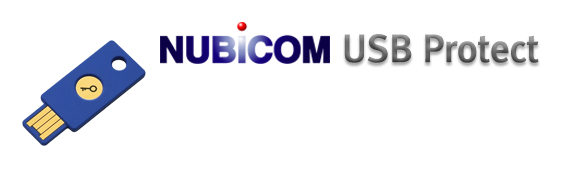
<style>
.page{position:relative;width:580px;height:177px;background:#ffffff}
.page>*{position:absolute;margin:0}
.t1{font:36px "RixGoEB";color:#6d6d6d}
</style>
<div class="page">
<p class="t1" style="left:344px;top:34px;width:195px;height:29px">USB Protect</p>
</div>
